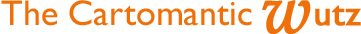
<style>
.page{position:relative;width:361px;height:34px;background:#ffffff}
.page>*{position:absolute;margin:0}
.t1{font:36px "GillSansMT";color:#ef6f08}
.t2{font:68px "PalatinoLinotype-Italic";color:#ef6f08;font-weight:bold}
.t3{font:36px "GillSansMT";color:#ef6f08;font-weight:bold}
</style>
<div class="page">
<p class="t1" style="left:1px;top:0px;width:251px;height:26px">The Cartomantic</p>
<p class="t2" style="left:262px;top:0px;width:49px;height:34px">w</p>
<p class="t3" style="left:315px;top:5px;width:46px;height:21px">utz</p>
</div>
